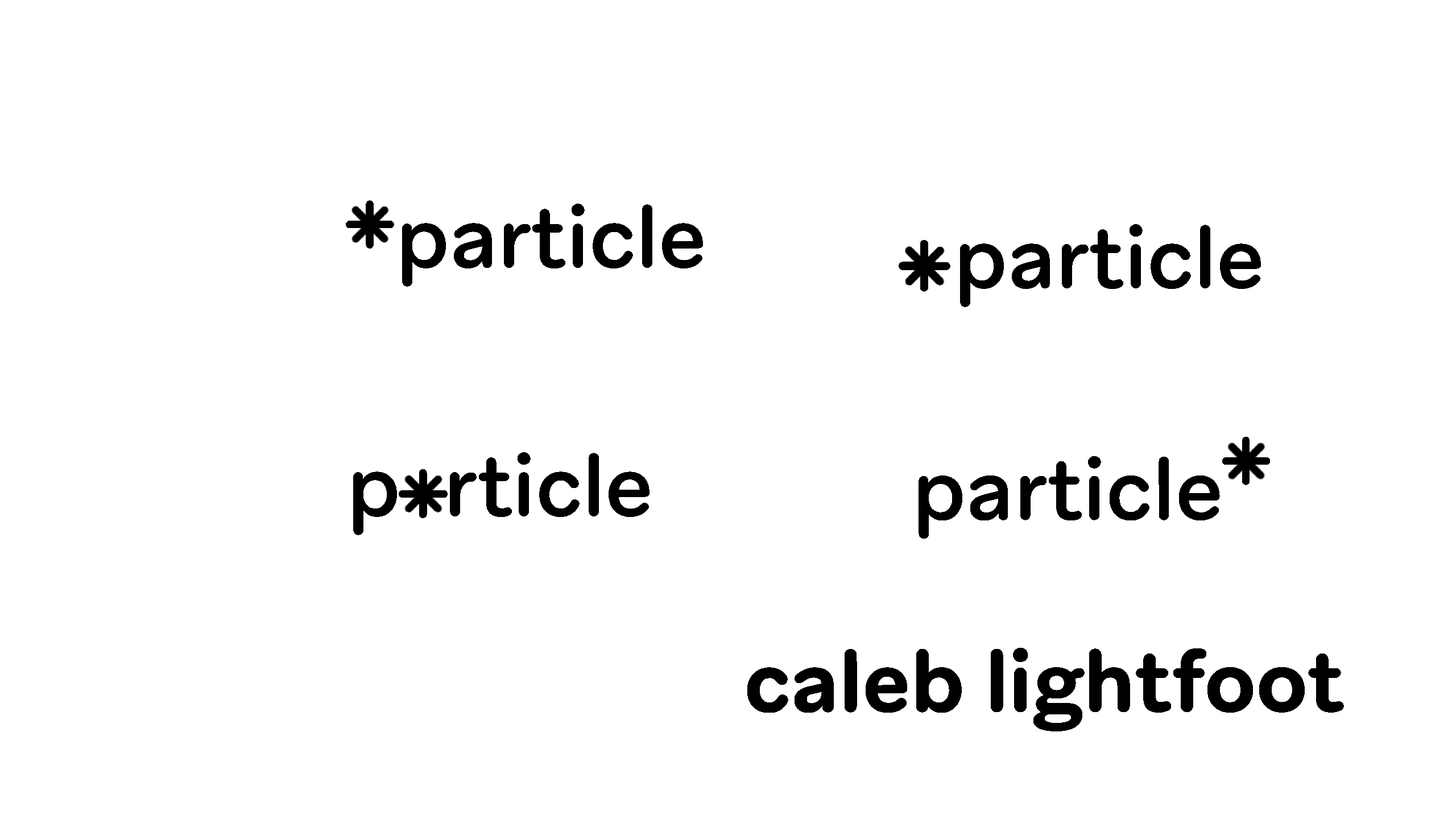
<style>
.page{position:relative;width:1456px;height:819px;background:#ffffff}
.page>*{position:absolute;margin:0}
.t1{font:64.5px "AribauRoundedTrial-Medium";color:#000000}
.t2{font:85.3px "AribauRoundedTrial-Medium";color:#000000}
.t3{font:69.1px "AribauRoundedTrial-Medium";color:#000000}
.t4{font:65.7px "AribauRoundedTrial-Medium";color:#000000}
.t5{font:85.3px "AribauRoundedTrial-Bold";color:#000000}
</style>
<div class="page">
<p class="t1" style="left:366px;top:200px;width:8px;height:49px">l</p>
<p class="t2" style="left:402px;top:204px;width:301px;height:83px">particle</p>
<p class="t1" style="left:346px;top:221px;width:48px;height:7px;rotate:90deg">l</p>
<p class="t2" style="left:960px;top:224px;width:302px;height:83px">particle</p>
<p class="t3" style="left:920px;top:240px;width:8px;height:52px">l</p>
<p class="t3" style="left:899px;top:262px;width:51px;height:8px;rotate:90deg">l</p>
<p class="t1" style="left:1242px;top:437px;width:8px;height:48px">l</p>
<p class="t2" style="left:353px;top:452px;width:298px;height:83px">p  rticle</p>
<p class="t2" style="left:919px;top:456px;width:301px;height:83px">particle</p>
<p class="t1" style="left:1222px;top:457px;width:48px;height:8px;rotate:90deg">l</p>
<p class="t4" style="left:419px;top:469px;width:8px;height:49px">l</p>
<p class="t4" style="left:399px;top:490px;width:49px;height:8px;rotate:90deg">l</p>
<p class="t5" style="left:747px;top:647px;width:597px;height:84px">caleb lightfoot</p>
</div>
